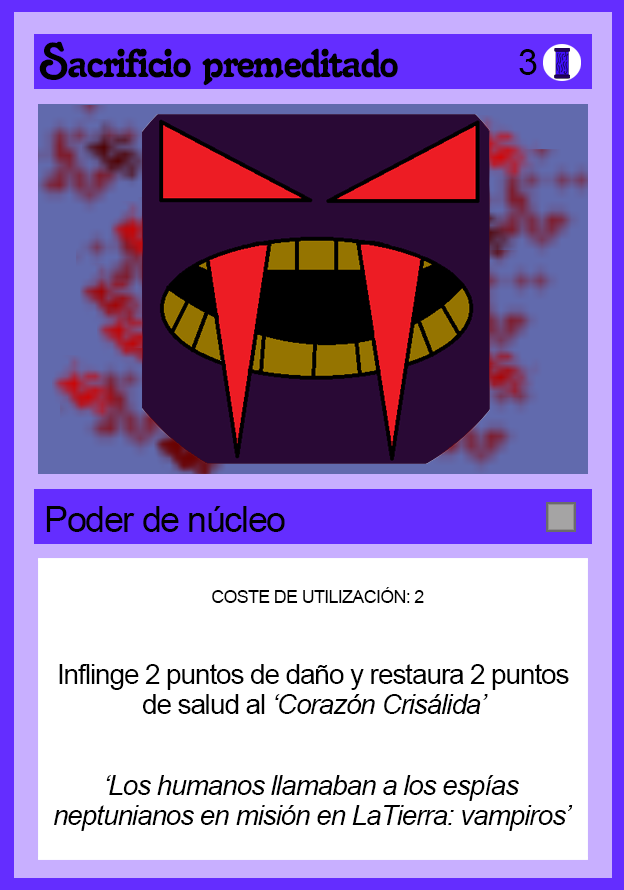
<style>
.page{position:relative;width:624px;height:890px;background:#ffffff}
.page>*{position:absolute;margin:0}
.t1{font:48px "Salina";letter-spacing:-0.04em;color:#000000}
.t2{font:36px "ArialMT";letter-spacing:-0.04em;color:#000000}
.t3{font:18px "ArialMT";letter-spacing:-0.04em;color:#000000}
.t4{font:28px/30px "ArialMT";letter-spacing:-0.04em;color:#000000}
.t5{font:28px/30px "Arial-ItalicMT";letter-spacing:-0.04em;color:#000000}
</style>
<div class="page">
<p class="t1" style="left:39px;top:41px;width:359px;height:45px">Sacrificio premeditado</p>
<p class="t2" style="left:519px;top:49px;width:18px;height:26px">3</p>
<p class="t2" style="left:46px;top:506px;width:239px;height:26px">Poder de núcleo</p>
<p class="t3" style="left:212px;top:587px;width:212px;height:16px">COSTE DE UTILIZACIÓN: 2</p>
<p class="t4" style="left:59px;top:664px;width:510px;height:50px;text-align:center">Inflinge 2 puntos de daño y restaura 2 puntos de salud al <span class="t5">‘Corazón Crisálida’</span></p>
<p class="t5" style="left:54px;top:775px;width:519px;height:56px;text-align:center">‘Los humanos llamaban a los espías neptunianos en misión en LaTierra: vampiros’</p>
</div>
